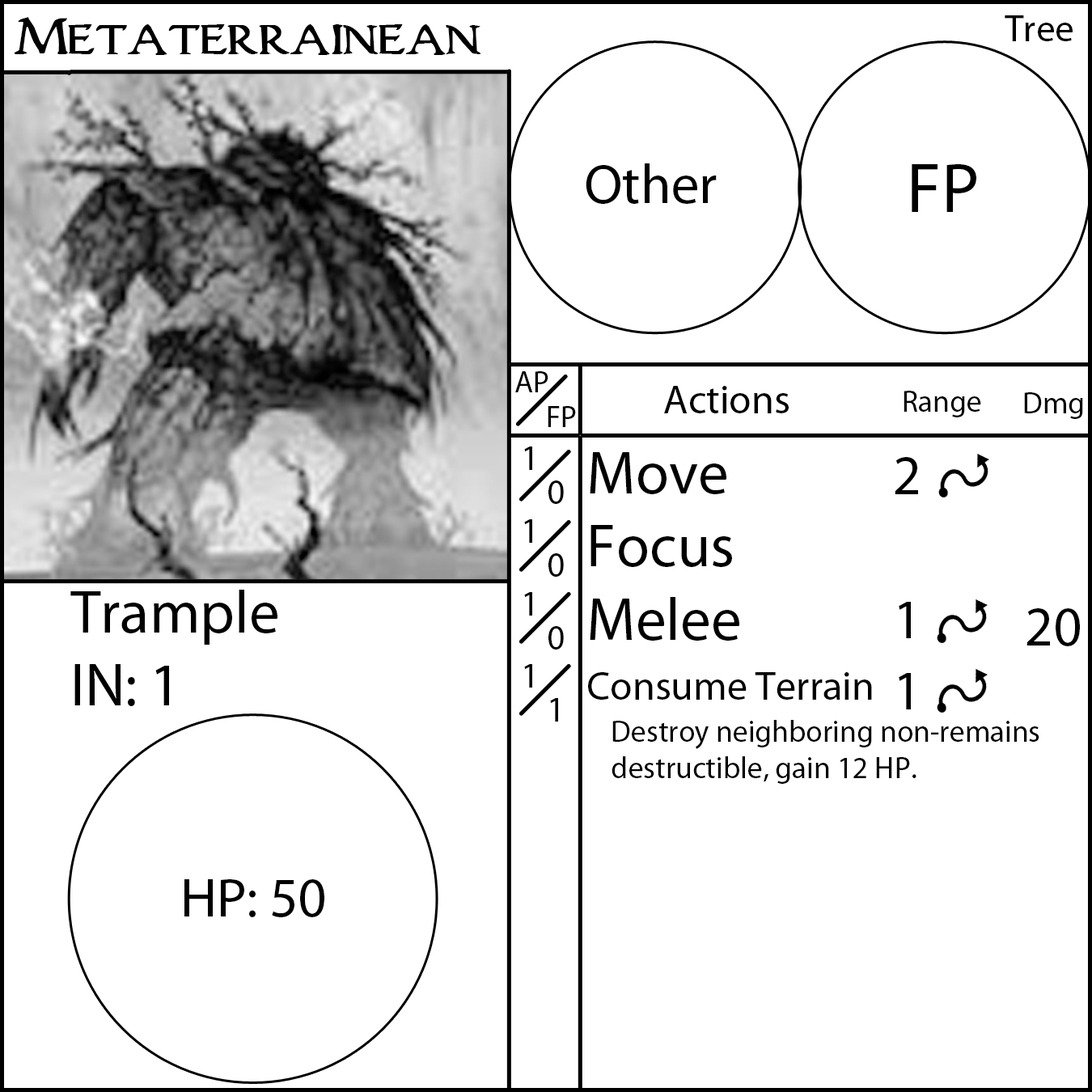
<style>
.page{position:relative;width:1092px;height:1092px;background:#ffffff}
.page>*{position:absolute;margin:0}
.t1{font:55.6px "WoodgodExpanded";color:#000000}
.t2{font:37.9px "MyriadPro-Regular";color:#000000}
.t3{font:55.6px "MyriadPro-Regular";color:#000000}
.t4{font:70.8px "MyriadPro-Regular";color:#000000}
.t5{font:30.3px "MyriadPro-Regular";color:#000000}
.t6{font:40.4px "MyriadPro-Regular";color:#000000}
.t7{font:35.4px "MyriadPro-Regular";color:#000000}
.t8{font:60.7px "MyriadPro-Regular";color:#000000}
</style>
<div class="page">
<p class="t1" style="left:14px;top:17px;width:467px;height:38px">Metaterrainean</p>
<p class="t2" style="left:1005px;top:15px;width:68px;height:26px">Tree</p>
<p class="t3" style="left:586px;top:163px;width:131px;height:41px">Other</p>
<p class="t4" style="left:912px;top:164px;width:64px;height:48px">FP</p>
<p class="t5" style="left:515px;top:371px;width:33px;height:21px">AP</p>
<p class="t6" style="left:664px;top:386px;width:125px;height:27px">Actions</p>
<p class="t5" style="left:904px;top:391px;width:77px;height:26px">Range</p>
<p class="t5" style="left:1024px;top:392px;width:59px;height:27px">Dmg</p>
<p class="t5" style="left:548px;top:406px;width:28px;height:21px">FP</p>
<p class="t7" style="left:524px;top:447px;width:8px;height:241px">1<br>1<br>1<br>1</p>
<p class="t5" style="left:588px;top:452px;width:451px;height:332px"><span class="t8">Move<br>Focus<br>Melee<br></span><span class="t6">Consume Terrain<br></span> Destroy neighboring non-remains<br> destructible, gain 12 HP.</p>
<p class="t3" style="left:895px;top:457px;width:23px;height:252px;text-align:center">2<br><br>1<br>1</p>
<p class="t7" style="left:548px;top:480px;width:16px;height:242px">0<br>0<br>0<br>1</p>
<p class="t8" style="left:70px;top:590px;width:207px;height:116px">Trample<br>IN: 1</p>
<p class="t3" style="left:1026px;top:608px;width:54px;height:38px">20</p>
<p class="t3" style="left:184px;top:879px;width:140px;height:38px">HP: 50</p>
</div>
